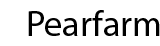
<style>
.page{position:relative;width:160px;height:46px;background:#ffffff}
.page>*{position:absolute;margin:0}
.t1{font:36px "MyriadPro-Regular";color:#000000}
</style>
<div class="page">
<p class="t1" style="left:28px;top:10px;width:132px;height:26px">Pearfarm</p>
</div>
